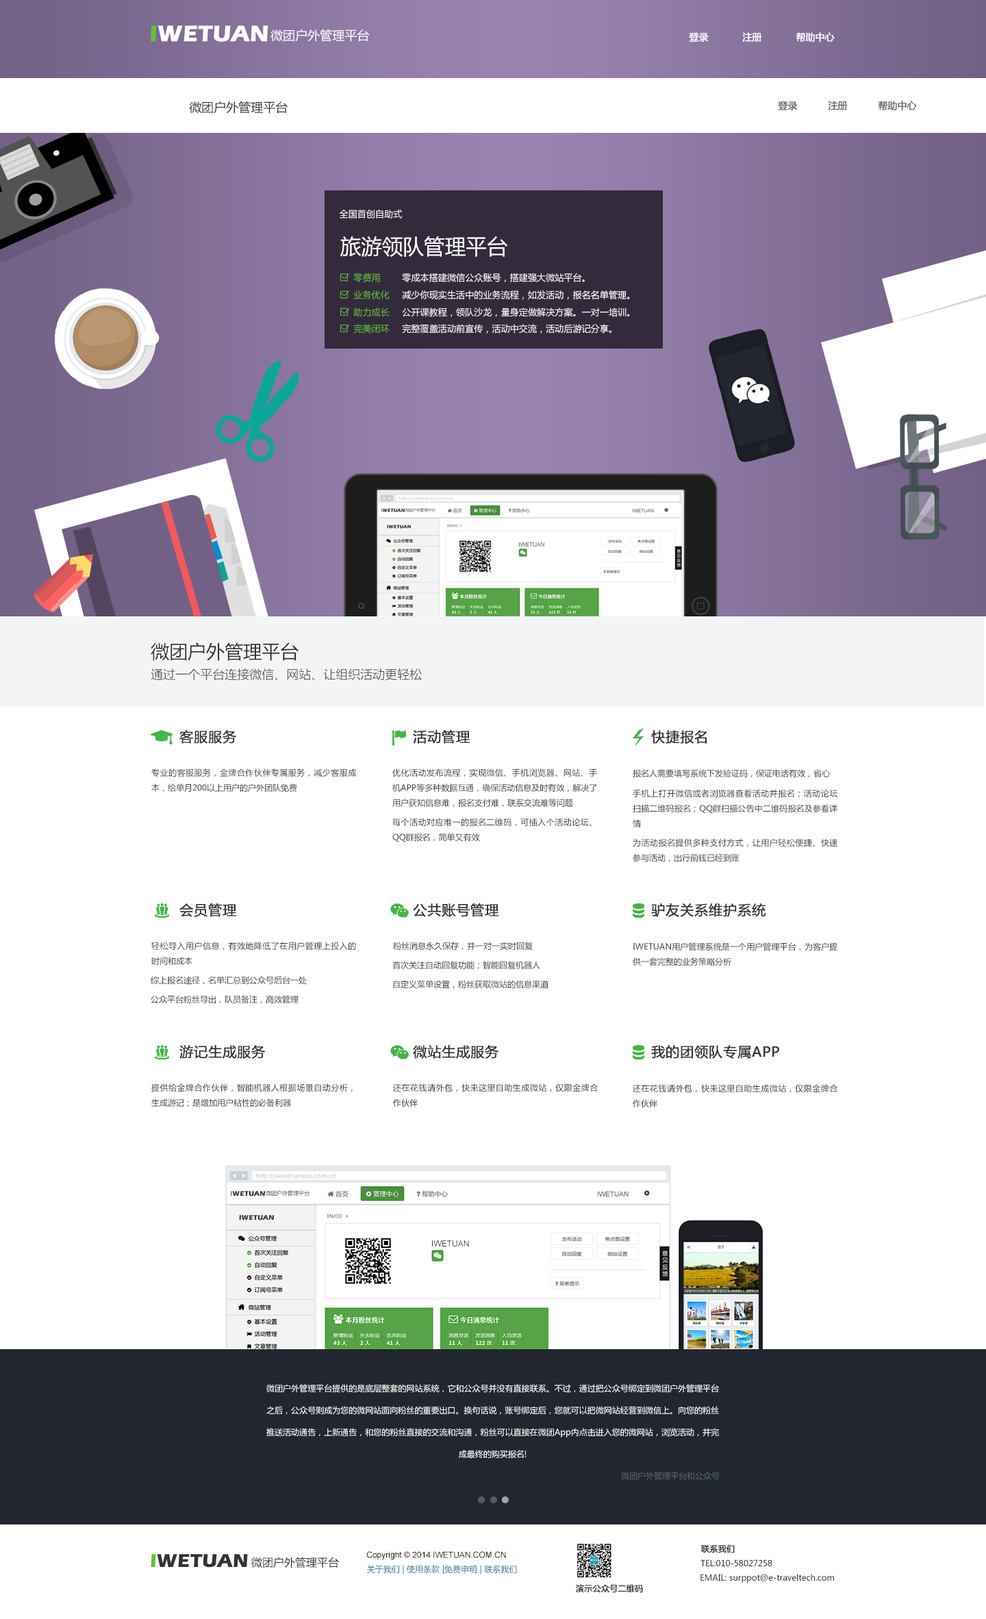
<style>
.page{position:relative;width:986px;height:1619px;background:#ffffff}
.page>*{position:absolute;margin:0}
.t1{font:23.3px "ErasITC-Bold";color:#ffffff}
.t2{font:23.3px "ErasITC-Bold";color:#67bd3c}
.t3{font:12.3px "MicrosoftYaHei";color:#ffffff}
.t4{font:9.6px "MicrosoftYaHei";color:#ffffff;font-weight:bold}
.t5{font:12.3px "MicrosoftYaHei";color:#333333}
.t6{font:9.6px "MicrosoftYaHei";color:#666666;font-weight:bold}
.t7{font:9px "MicrosoftYaHei";color:#ffffff}
.t8{font:21px "MicrosoftYaHei";color:#ffffff}
.t9{font:9px "MicrosoftYaHei";color:#61bb3c}
.t10{font:18.5px "MicrosoftYaHei";color:#333333}
.t11{font:12.3px "MicrosoftYaHei";color:#5f5f5f}
.t12{font:13.7px "MicrosoftYaHei";color:#333333;font-weight:bold}
.t13{font:8.2px/15.1px "MicrosoftYaHei";color:#3c3c3c}
.t14{font:8.2px "MicrosoftYaHei";color:#3c3c3c}
.t15{font:8.2px/21.9px "MicrosoftYaHei";color:#ffffff}
.t16{font:8.2px "MicrosoftYaHei";color:#586277}
.t17{font:8.2px "ArialMT";color:#000000}
.t18{font:8.2px "MicrosoftYaHei";color:#333333;font-weight:bold}
.t19{font:19.2px "ErasITC-Bold";color:#333333}
.t20{font:19.2px "ErasITC-Bold";color:#67bd3c}
.t21{font:11px "MicrosoftYaHei";color:#333333}
.t22{font:8.2px "MicrosoftYaHei";color:#347396}
.t23{font:8.2px "MicrosoftYaHei";color:#333333}
</style>
<div class="page">
<p class="t1" style="left:151px;top:25px;width:118px;height:17px"><span class="t2">I</span>WETUAN</p>
<p class="t3" style="left:271px;top:29px;width:99px;height:13px">微团户外管理平台</p>
<p class="t4" style="left:689px;top:32px;width:146px;height:10px">登录          注册          帮助中心</p>
<p class="t5" style="left:189px;top:101px;width:99px;height:13px">微团户外管理平台</p>
<p class="t6" style="left:778px;top:101px;width:139px;height:10px">登录         注册         帮助中心</p>
<p class="t7" style="left:339px;top:209px;width:63px;height:10px">全国首创自助式</p>
<p class="t8" style="left:340px;top:236px;width:168px;height:21px">旅游领队管理平台</p>
<p class="t9" style="left:353px;top:273px;width:27px;height:9px">零费用</p>
<p class="t7" style="left:402px;top:273px;width:183px;height:9px">零成本搭建微信公众账号，搭建强大微站平台。</p>
<p class="t9" style="left:353px;top:290px;width:37px;height:9px">业务优化</p>
<p class="t7" style="left:402px;top:290px;width:228px;height:10px">减少你现实生活中的业务流程，如发活动，报名名单管理。</p>
<p class="t9" style="left:353px;top:308px;width:37px;height:9px">助力成长</p>
<p class="t7" style="left:402px;top:308px;width:228px;height:9px">公开课教程，领队沙龙，量身定做解决方案。一对一培训。</p>
<p class="t9" style="left:353px;top:324px;width:37px;height:10px">完美闭环</p>
<p class="t7" style="left:402px;top:324px;width:210px;height:10px">完整覆盖活动前宣传，活动中交流，活动后游记分享。</p>
<p class="t10" style="left:151px;top:643px;width:148px;height:18px">微团户外管理平台</p>
<p class="t11" style="left:151px;top:668px;width:272px;height:13px">通过一个平台连接微信、网站、让组织活动更轻松</p>
<p class="t12" style="left:179px;top:730px;width:58px;height:14px">客服服务</p>
<p class="t12" style="left:413px;top:730px;width:58px;height:14px">活动管理</p>
<p class="t12" style="left:651px;top:730px;width:56px;height:14px">快捷报名</p>
<p class="t13" style="left:151px;top:769px;width:205px;height:24px;text-align:justify">专业的客服服务，金牌合作伙伴专属服务，减少客服成本，给单月200以上用户的户外团队免费</p>
<p class="t13" style="left:393px;top:769px;width:204px;height:39px;text-align:justify">优化活动发布流程，实现微信、手机浏览器、网站、手机APP等多种数据互通，确保活动信息及时有效，解决了用户获知信息难，报名支付难，联系交流难等问题</p>
<p class="t14" style="left:633px;top:769px;width:197px;height:9px">报名人需要填写系统下发验证码，保证电话有效，省心</p>
<p class="t13" style="left:633px;top:789px;width:205px;height:39px;text-align:justify">手机上打开微信或者浏览器查看活动并报名；活动论坛扫描二维码报名；QQ群扫描公告中二维码报名及参看详情</p>
<p class="t13" style="left:393px;top:818px;width:199px;height:25px;text-align:justify">每个活动对应唯一的报名二维码，可插入个活动论坛、QQ群报名，简单又有效</p>
<p class="t13" style="left:633px;top:839px;width:205px;height:23px;text-align:justify">为活动报名提供多种支付方式，让用户轻松便捷、快速参与活动，出行前钱已经到账</p>
<p class="t12" style="left:179px;top:904px;width:58px;height:13px">会员管理</p>
<p class="t12" style="left:413px;top:904px;width:86px;height:13px">公共账号管理</p>
<p class="t12" style="left:651px;top:904px;width:116px;height:13px">驴友关系维护系统</p>
<p class="t13" style="left:151px;top:942px;width:205px;height:24px;text-align:justify">轻松导入用户信息，有效地降低了在用户管理上投入的时间和成本</p>
<p class="t14" style="left:393px;top:942px;width:140px;height:9px">粉丝消息永久保存，并一对一实时回复</p>
<p class="t13" style="left:633px;top:943px;width:205px;height:24px;text-align:justify">IWETUAN用户管理系统是一个用户管理平台，为客户提供一套完整的业务策略分析</p>
<p class="t14" style="left:393px;top:961px;width:148px;height:9px">首次关注自动回复功能；智能回复机器人</p>
<p class="t14" style="left:151px;top:976px;width:156px;height:9px">综上报名途径，名单汇总到公众号后台一处</p>
<p class="t14" style="left:393px;top:980px;width:156px;height:9px">自定义菜单设置，粉丝获取微站的信息渠道</p>
<p class="t14" style="left:151px;top:995px;width:148px;height:9px">公众平台粉丝导出，队员备注，高效管理</p>
<p class="t12" style="left:179px;top:1045px;width:87px;height:14px">游记生成服务</p>
<p class="t12" style="left:413px;top:1045px;width:86px;height:14px">微站生成服务</p>
<p class="t12" style="left:651px;top:1045px;width:129px;height:14px">我的团领队专属APP</p>
<p class="t13" style="left:151px;top:1084px;width:202px;height:24px;text-align:justify">提供给金牌合作伙伴，智能机器人根据场景自动分析，生成游记；是增加用户粘性的必备利器</p>
<p class="t13" style="left:393px;top:1084px;width:206px;height:23px;text-align:justify">还在花钱请外包，快来这里自助生成微站，仅限金牌合作伙伴</p>
<p class="t13" style="left:633px;top:1084px;width:206px;height:24px;text-align:justify">还在花钱请外包，快来这里自助生成微站，仅限金牌合作伙伴</p>
<p class="t15" style="left:266px;top:1385px;width:453px;height:74px;text-align:justify">微团户外管理平台提供的是底层整套的网站系统，它和公众号并没有直接联系。不过，通过把公众号绑定到微团户外管理平台之后，公众号则成为您的微网站面向粉丝的重要出口。换句话说，账号绑定后，您就可以把微网站经营到微信上。向您的粉丝推送活动通告，上新通告，和您的粉丝直接的交流和沟通，粉丝可以直接在微团App内点击进入您的微网站，浏览活动，并完成最终的购买报名!</p>
<p class="t16" style="left:621px;top:1472px;width:99px;height:8px">微团户外管理平台和公众号</p>
<p class="t17" style="left:367px;top:1552px;width:139px;height:8px">Copyright © 2014 IWETUAN.COM.CN</p>
<p class="t18" style="left:701px;top:1545px;width:34px;height:9px">联系我们</p>
<p class="t19" style="left:151px;top:1554px;width:97px;height:14px"><span class="t20">I</span>WETUAN</p>
<p class="t21" style="left:251px;top:1557px;width:88px;height:12px">微团户外管理平台</p>
<p class="t22" style="left:367px;top:1565px;width:150px;height:10px">关于我们 | 使用条款 |免费申明 | 联系我们</p>
<p class="t23" style="left:701px;top:1560px;width:72px;height:7px">TEL:010-58027258</p>
<p class="t23" style="left:701px;top:1574px;width:133px;height:9px">EMAIL: surppot@e-traveltech.com</p>
<p class="t18" style="left:576px;top:1585px;width:67px;height:8px">演示公众号二维码</p>
</div>
